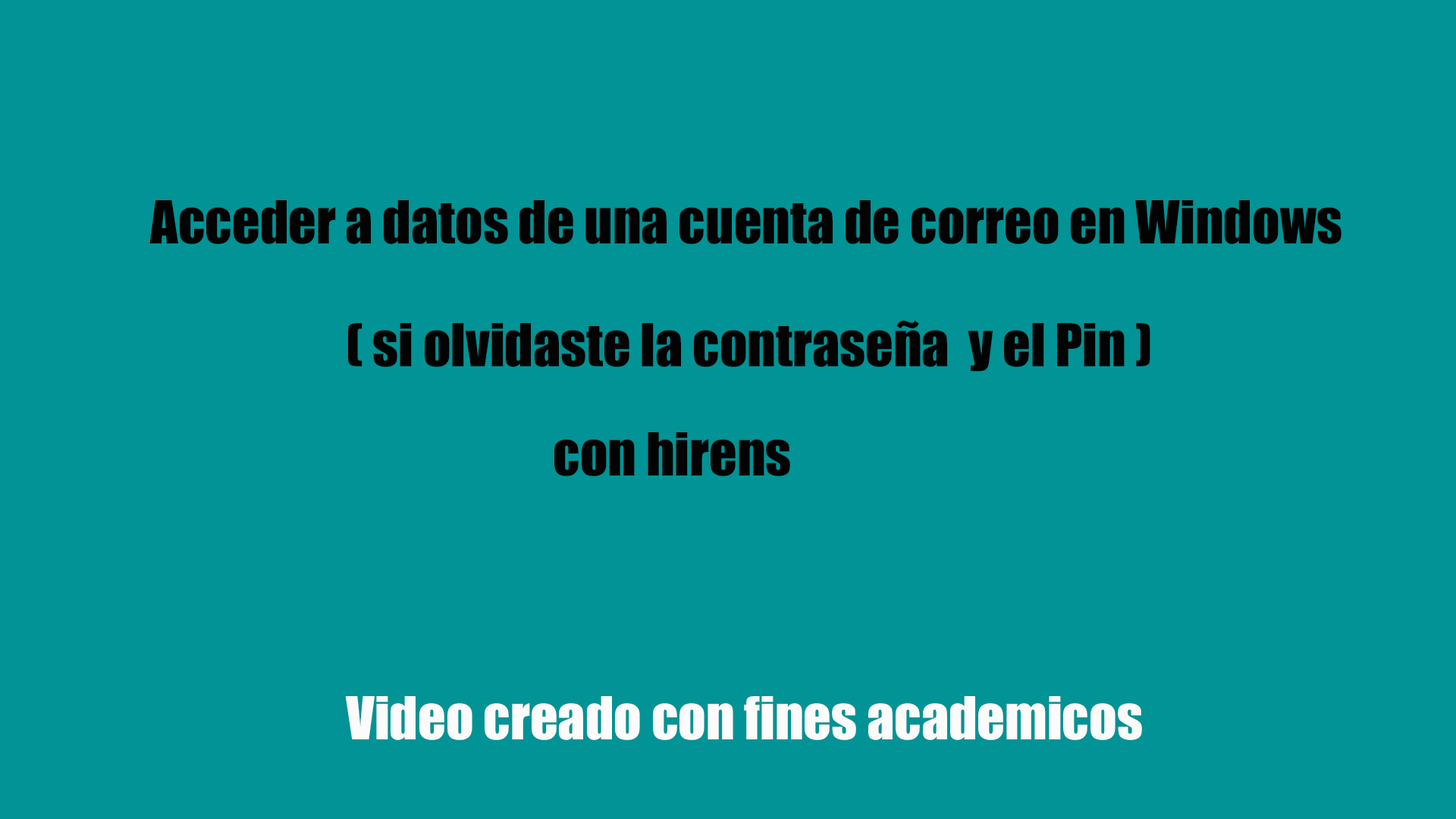
<style>
.page{position:relative;width:1456px;height:819px;background:#019395}
.page>*{position:absolute;margin:0}
.t1{font:54.6px "Impact";color:#030303}
.t2{font:54.6px "Impact";color:#fbfbfb}
</style>
<div class="page">
<p class="t1" style="left:149px;top:200px;width:1192px;height:44px">Acceder a datos de una cuenta de correo en Windows</p>
<p class="t1" style="left:348px;top:320px;width:802px;height:52px">( si olvidaste la contraseña  y el Pin )</p>
<p class="t1" style="left:554px;top:432px;width:236px;height:44px">con hirens</p>
<p class="t2" style="left:345px;top:696px;width:797px;height:44px">Video creado con fines academicos</p>
</div>
